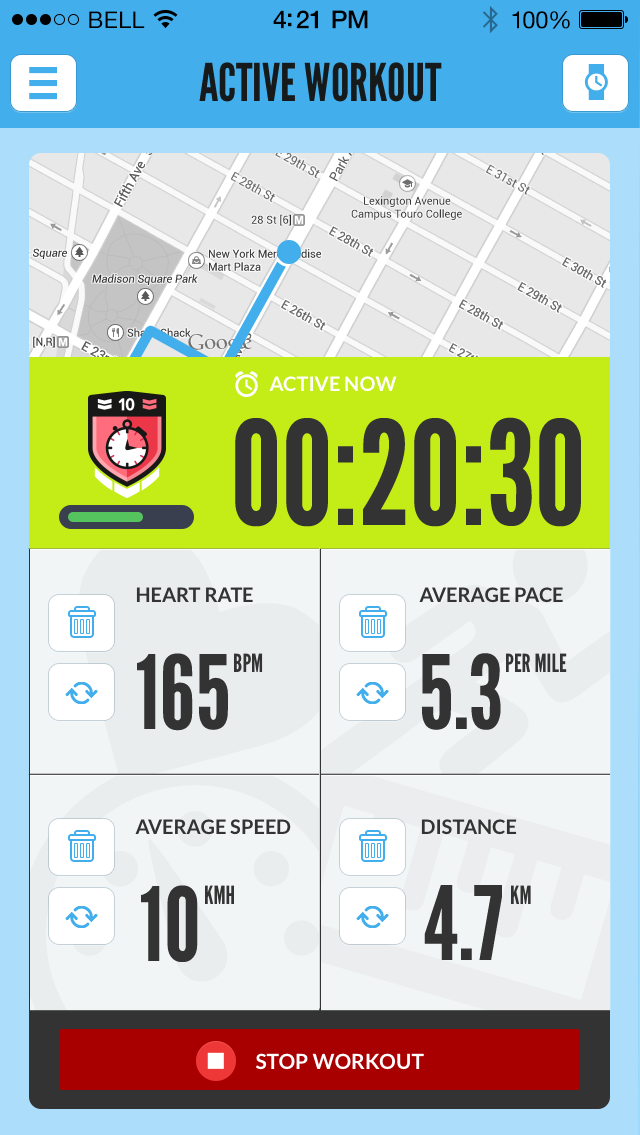
<style>
.page{position:relative;width:640px;height:1135px}
.page>*{position:absolute;margin:0}
.t1{font:23px "HelveticaNeue";letter-spacing:0.02em;color:#000000}
.t2{font:25px "HelveticaNeue-Medium";letter-spacing:-0.02em;color:#000000}
.t3{font:24px "HelveticaNeue";letter-spacing:-0.02em;color:#010101}
.t4{font:52px "LeagueGothic-Regular";color:#161a1a;text-transform:uppercase}
.t5{font:20px "Lato-Bold";color:#ffffff}
.t6{font:144px "LeagueGothic-Regular";color:#333333;text-transform:uppercase}
.t7{font:20px "Lato-Bold";color:#333333}
.t8{font:102px "LeagueGothic-Regular";color:#333333;text-transform:uppercase}
.t9{font:25px "LeagueGothic-Regular";color:#333333;text-transform:uppercase}
.t10{font:21px "Lato-Bold";color:#ffffff}
</style>
<div class="page">
<p class="t1" style="left:89px;top:11px;width:56px;height:17px">BELL</p>
<p class="t2" style="left:273px;top:10px;width:95px;height:19px">4:21 PM</p>
<p class="t3" style="left:512px;top:11px;width:58px;height:18px">100%</p>
<p class="t4" style="left:199px;top:62px;width:243px;height:40px">ACTIVE WORKOUT</p>
<p class="t5" style="left:269px;top:376px;width:128px;height:16px">ACTIVE NOW</p>
<p class="t6" style="left:235px;top:417px;width:346px;height:110px">00:20:30</p>
<p class="t7" style="left:136px;top:587px;width:117px;height:15px">HEART RATE</p>
<p class="t7" style="left:419px;top:587px;width:144px;height:16px">AVERAGE PACE</p>
<p class="t8" style="left:137px;top:653px;width:91px;height:78px">165</p>
<p class="t9" style="left:234px;top:653px;width:29px;height:19px">BPM</p>
<p class="t8" style="left:421px;top:653px;width:80px;height:77px">5.3</p>
<p class="t9" style="left:506px;top:653px;width:61px;height:19px">PER MILE</p>
<p class="t7" style="left:135px;top:819px;width:156px;height:16px">AVERAGE SPEED</p>
<p class="t7" style="left:421px;top:819px;width:96px;height:16px">DISTANCE</p>
<p class="t8" style="left:141px;top:885px;width:57px;height:77px">10</p>
<p class="t9" style="left:205px;top:885px;width:29px;height:19px">KMH</p>
<p class="t8" style="left:424px;top:885px;width:78px;height:75px">4.7</p>
<p class="t9" style="left:511px;top:885px;width:20px;height:19px">KM</p>
<p class="t10" style="left:256px;top:1053px;width:168px;height:17px">STOP WORKOUT</p>
</div>
